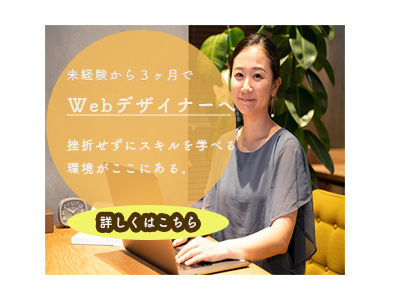
<style>
.page{position:relative;width:400px;height:300px;background:#ffffff}
.page>*{position:absolute;margin:0}
.t1{font:13px "TsukuBRdGothic-Bold";letter-spacing:0.1em;color:#f2ede7}
.t2{font:18.8px "TsukuBRdGothic-Bold";letter-spacing:0.1em;color:#f2ede7}
</style>
<div class="page">
<p class="t1" style="left:67px;top:69px;width:126px;height:13px">未経験から３ヶ月で</p>
<p class="t2" style="left:67px;top:96px;width:168px;height:18px">Webデザイナーへ</p>
<p class="t1" style="left:67px;top:138px;width:168px;height:37px">挫折せずにスキルを学べる<br>環境がここにある。</p>
<p class="t1" style="left:100px;top:216px;width:96px;height:13px">詳しくはこちら</p>
</div>
